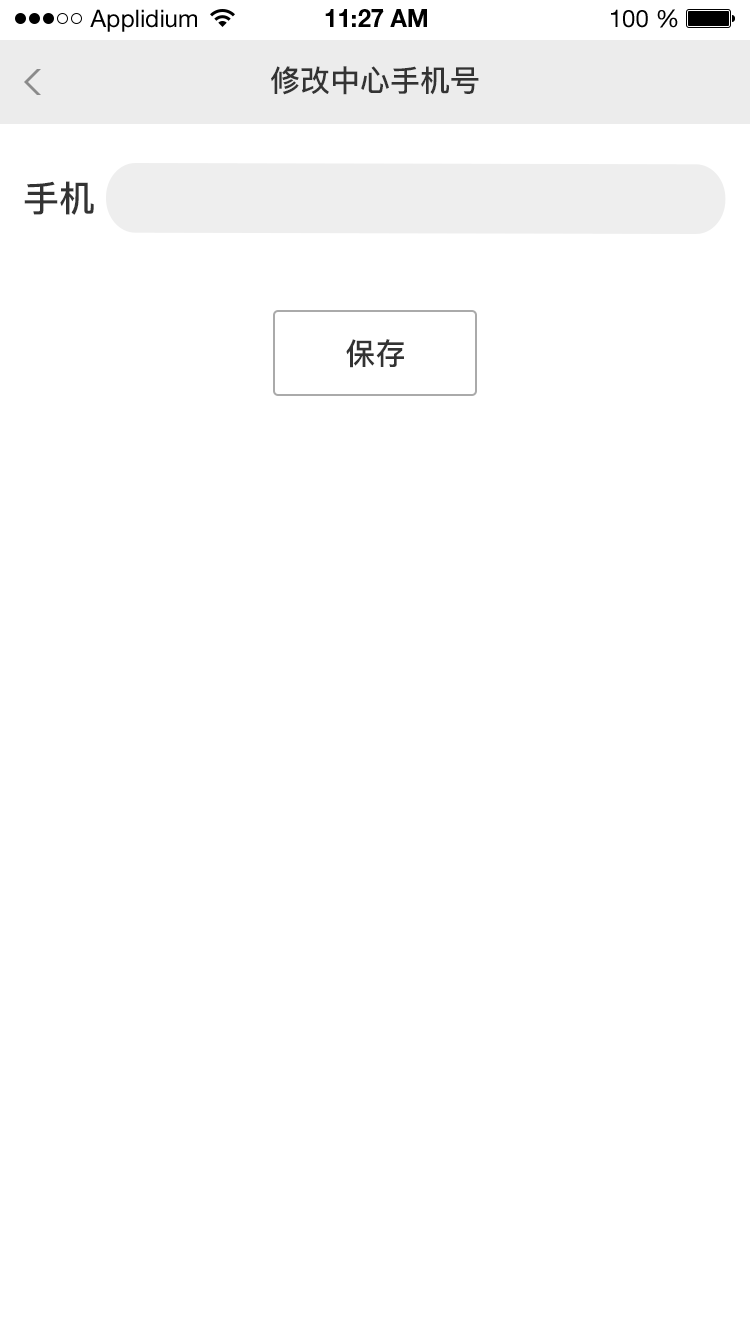
<style>
.page{position:relative;width:750px;height:1334px;background:#ffffff}
.page>*{position:absolute;margin:0}
.t1{font:24px "HelveticaNeueLTStd-Roman";color:#000000}
.t2{font:24px "HelveticaNeueLTStd-Bd";color:#000000}
.t3{font:30px "PingFang-SC-Bold";color:#333333}
.t4{font:36px "PingFang-SC-Bold";color:#333333}
</style>
<div class="page">
<p class="t1" style="left:90px;top:9px;width:107px;height:23px">Applidium</p>
<p class="t2" style="left:325px;top:9px;width:102px;height:18px">11:27 AM</p>
<p class="t1" style="left:611px;top:9px;width:67px;height:19px">100 %</p>
<p class="t3" style="left:271px;top:66px;width:208px;height:29px">修改中心手机号</p>
<p class="t4" style="left:24px;top:181px;width:70px;height:34px">手机</p>
<p class="t3" style="left:346px;top:339px;width:58px;height:29px">保存</p>
</div>
